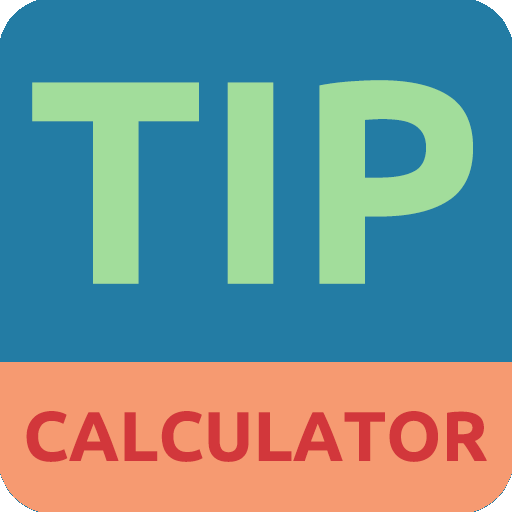
<style>
.page{position:relative;width:512px;height:512px;background:#237ca4}
.page>*{position:absolute;margin:0}
.t1{font:290px "Ubuntu-Bold";color:#a2dd9b}
.t2{font:70px "Ubuntu-Bold";color:#d2373b}
</style>
<div class="page">
<p class="t1" style="left:32px;top:80px;width:441px;height:204px">TIP</p>
<p class="t2" style="left:26px;top:411px;width:461px;height:51px">CALCULATOR</p>
</div>
